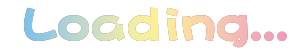
<style>
.page{position:relative;width:300px;height:50px;background:#ffffff}
.page>*{position:absolute;margin:0}
.t1{font:50px "DFPHaiBaoW12";letter-spacing:-0.005em;color:#82c4e7}
.t2{font:50px "DFPHaiBaoW12";letter-spacing:-0.005em;color:#b5d5d0}
.t3{font:50px "DFPHaiBaoW12";letter-spacing:-0.005em;color:#d8e3b7}
.t4{font:50px "DFPHaiBaoW12";letter-spacing:-0.005em;color:#f7ef9b}
.t5{font:50px "DFPHaiBaoW12";letter-spacing:-0.005em;color:#fae89b}
.t6{font:50px "DFPHaiBaoW12";letter-spacing:-0.005em;color:#f9d6a7}
.t7{font:50px "DFPHaiBaoW12";letter-spacing:-0.005em;color:#f4bab4}
.t8{font:50px "DFPHaiBaoW12";letter-spacing:-0.005em;color:#f2acb5}
.t9{font:50px "DFPHaiBaoW12";letter-spacing:-0.005em;color:#f1a3b6}
.t10{font:50px "DFPHaiBaoW12";letter-spacing:-0.005em;color:#f19cb6}
</style>
<div class="page">
<p class="t1" style="left:24px;top:7px;width:34px;height:34px">L</p>
<p class="t2" style="left:58px;top:15px;width:31px;height:26px">o</p>
<p class="t3" style="left:92px;top:15px;width:33px;height:26px">a</p>
<p class="t4" style="left:128px;top:7px;width:31px;height:34px">d</p>
<p class="t5" style="left:166px;top:7px;width:13px;height:35px">i</p>
<p class="t6" style="left:182px;top:15px;width:33px;height:26px">n</p>
<p class="t7" style="left:217px;top:15px;width:31px;height:33px">g</p>
<p class="t8" style="left:251px;top:31px;width:10px;height:10px">.</p>
<p class="t9" style="left:264px;top:31px;width:10px;height:10px">.</p>
<p class="t10" style="left:277px;top:31px;width:10px;height:10px">.</p>
</div>
